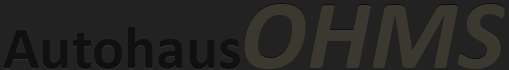
<style>
.page{position:relative;width:509px;height:70px;background:#222222}
.page>*{position:absolute;margin:0}
.t1{font:100px "Calibri-BoldItalic";color:#3b382f}
.t2{font:100px "Calibri-BoldItalic";color:#303030}
.t3{font:60px "Calibri-Bold";color:#101010}
</style>
<div class="page">
<p class="t1" style="left:244px;top:3px;width:261px;height:65px">OHMS</p>
<p class="t2" style="left:244px;top:4px;width:261px;height:65px">OHMS</p>
<p class="t1" style="left:244px;top:4px;width:261px;height:65px">OHMS</p>
<p class="t3" style="left:3px;top:28px;width:238px;height:42px">Autohaus</p>
<p class="t3" style="left:3px;top:27px;width:238px;height:42px">Autohaus</p>
</div>
